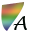
<style>
.page{position:relative;width:30px;height:35px;background:#ffffff}
.page>*{position:absolute;margin:0}
.t1{font:19.8px "LucidaHandwriting-Italic";color:#000702;scale:0.96 1}
</style>
<div class="page">
<p class="t1" style="left:13px;top:16px;width:14px;height:14px">A</p>
</div>
